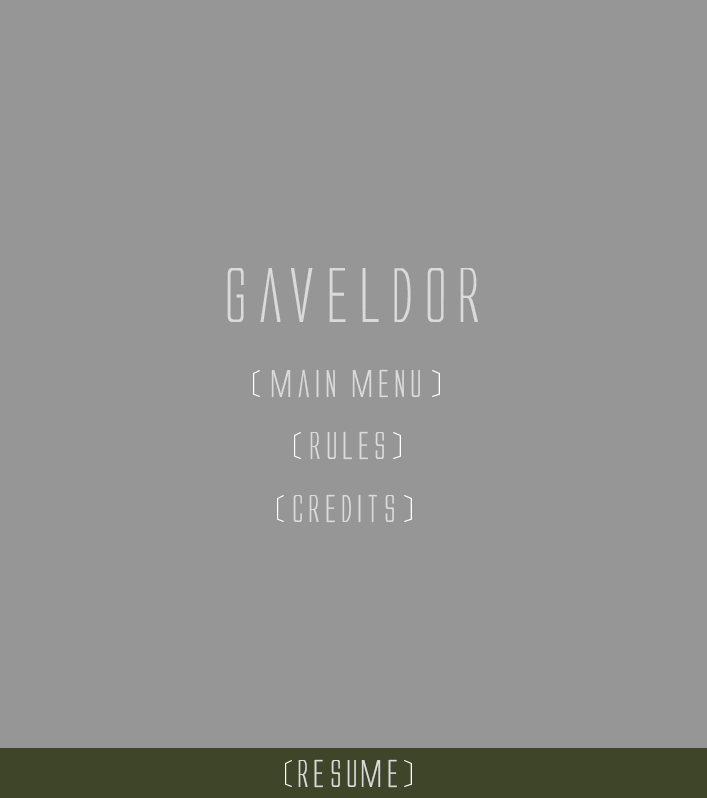
<style>
.page{position:relative;width:707px;height:798px;background:#969696}
.page>*{position:absolute;margin:0}
.t1{font:72px "AlienLeague";color:#dadada}
.t2{font:36px "AlienLeague";color:#dadada}
</style>
<div class="page">
<p class="t1" style="left:227px;top:268px;width:251px;height:54px">Gaveldor</p>
<p class="t2" style="left:271px;top:369px;width:149px;height:29px">main menu</p>
<p class="t2" style="left:310px;top:431px;width:74px;height:29px">Rules</p>
<p class="t2" style="left:293px;top:494px;width:101px;height:29px">credits</p>
<p class="t2" style="left:298px;top:759px;width:99px;height:29px">resume</p>
</div>
